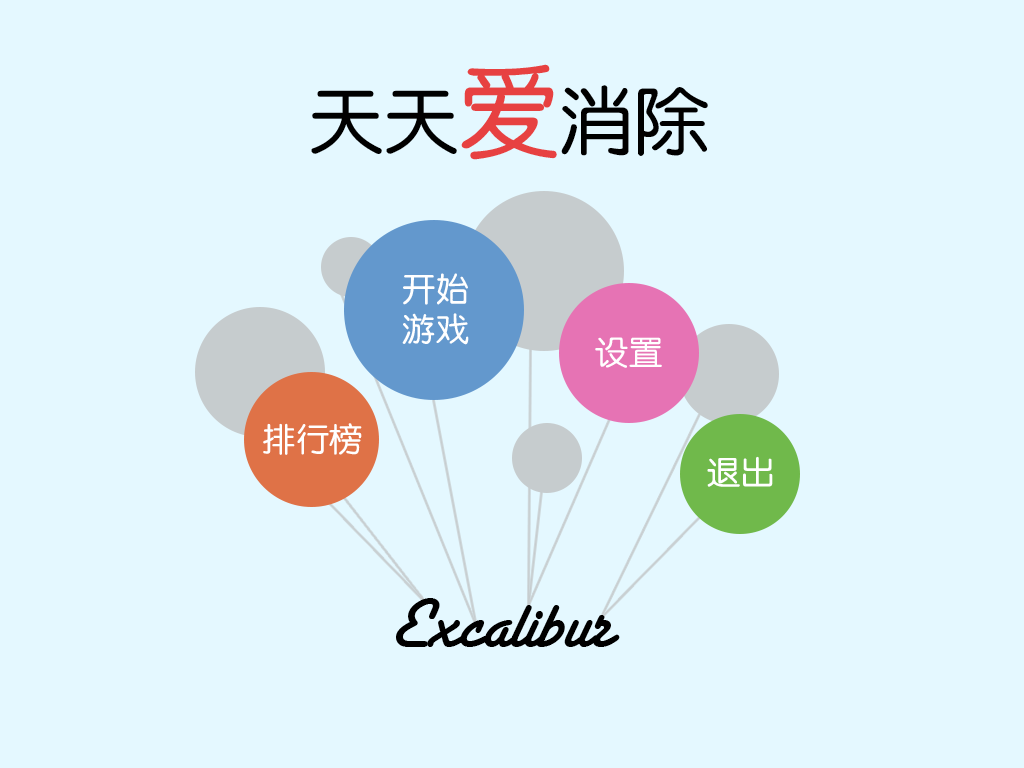
<style>
.page{position:relative;width:1024px;height:768px;background:#e4f8ff}
.page>*{position:absolute;margin:0}
.t1{font:75px "FZY3K--GBK1-0";color:#000000}
.t2{font:100px "FZY3K--GBK1-0";color:#e74141}
.t3{font:33.3px "FZY3K--GBK1-0";color:#ffffff}
.t4{font:75px "SantaFeLetPlain";color:#000000}
</style>
<div class="page">
<p class="t1" style="left:311px;top:64px;width:397px;height:96px">天天<span class="t2">爱</span>消除</p>
<p class="t3" style="left:402px;top:273px;width:67px;height:72px">开始<br>游戏</p>
<p class="t3" style="left:595px;top:337px;width:67px;height:31px">设置</p>
<p class="t3" style="left:263px;top:423px;width:99px;height:32px">排行榜</p>
<p class="t3" style="left:707px;top:456px;width:66px;height:31px">退出</p>
<p class="t4" style="left:396px;top:598px;width:224px;height:49px">Excalibur</p>
</div>
